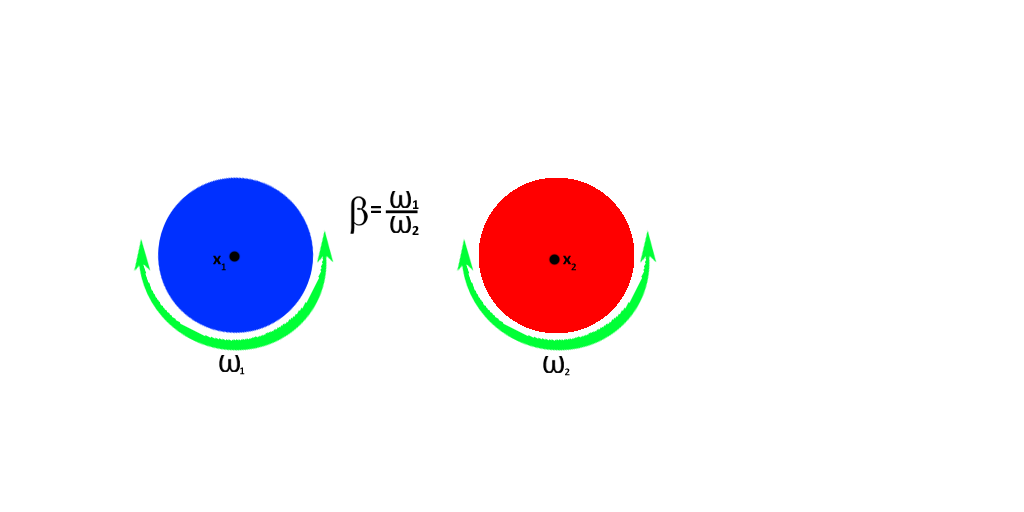
<style>
.page{position:relative;width:1024px;height:512px;background:#ffffff}
.page>*{position:absolute;margin:0}
.t1{font:24px "Calibri-Bold";color:#000000}
.t2{font:18px "Calibri-Bold";color:#000000}
</style>
<div class="page">
<p class="t1" style="left:371px;top:206px;width:10px;height:7px">=</p>
<p class="t1" style="left:413px;top:200px;width:6px;height:9px">1</p>
<p class="t1" style="left:412px;top:226px;width:7px;height:9px">2</p>
<p class="t2" style="left:213px;top:255px;width:13px;height:16px">x1</p>
<p class="t2" style="left:563px;top:255px;width:13px;height:16px">x2</p>
<p class="t2" style="left:240px;top:367px;width:5px;height:8px">1</p>
<p class="t2" style="left:565px;top:368px;width:5px;height:8px">2</p>
</div>
